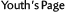
<style>
.page{position:relative;width:66px;height:12px;background:#ffffff}
.page>*{position:absolute;margin:0}
.t1{font:12px "Amira-Roman";color:#0a0a0a}
</style>
<div class="page">
<p class="t1" style="left:1px;top:0px;width:64px;height:12px">Youth’s Page</p>
</div>
